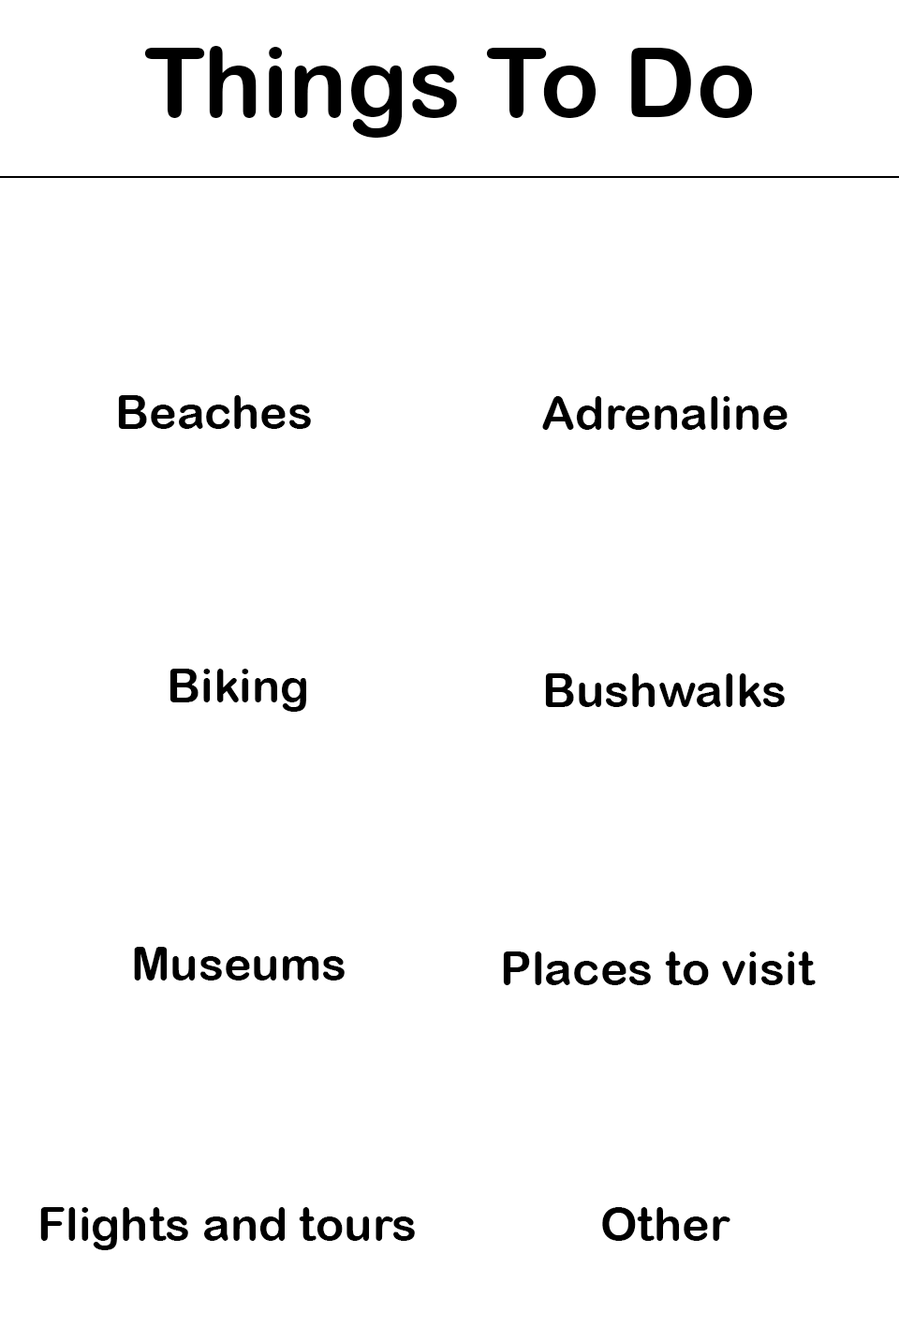
<style>
.page{position:relative;width:899px;height:1327px;background:#ffffff}
.page>*{position:absolute;margin:0}
.t1{font:97.5px "ArialRoundedMTBold";color:#000000}
.t2{font:46.8px "ArialRoundedMTBold";color:#000000}
</style>
<div class="page">
<p class="t1" style="left:144px;top:46px;width:609px;height:92px">Things To Do</p>
<p class="t2" style="left:118px;top:395px;width:193px;height:34px">Beaches</p>
<p class="t2" style="left:542px;top:396px;width:245px;height:34px">Adrenaline</p>
<p class="t2" style="left:169px;top:668px;width:137px;height:44px">Biking</p>
<p class="t2" style="left:545px;top:673px;width:240px;height:34px">Bushwalks</p>
<p class="t2" style="left:134px;top:947px;width:211px;height:33px">Museums</p>
<p class="t2" style="left:503px;top:951px;width:312px;height:34px">Places to visit</p>
<p class="t2" style="left:40px;top:1207px;width:375px;height:43px">Flights and tours</p>
<p class="t2" style="left:602px;top:1207px;width:128px;height:34px">Other</p>
</div>
